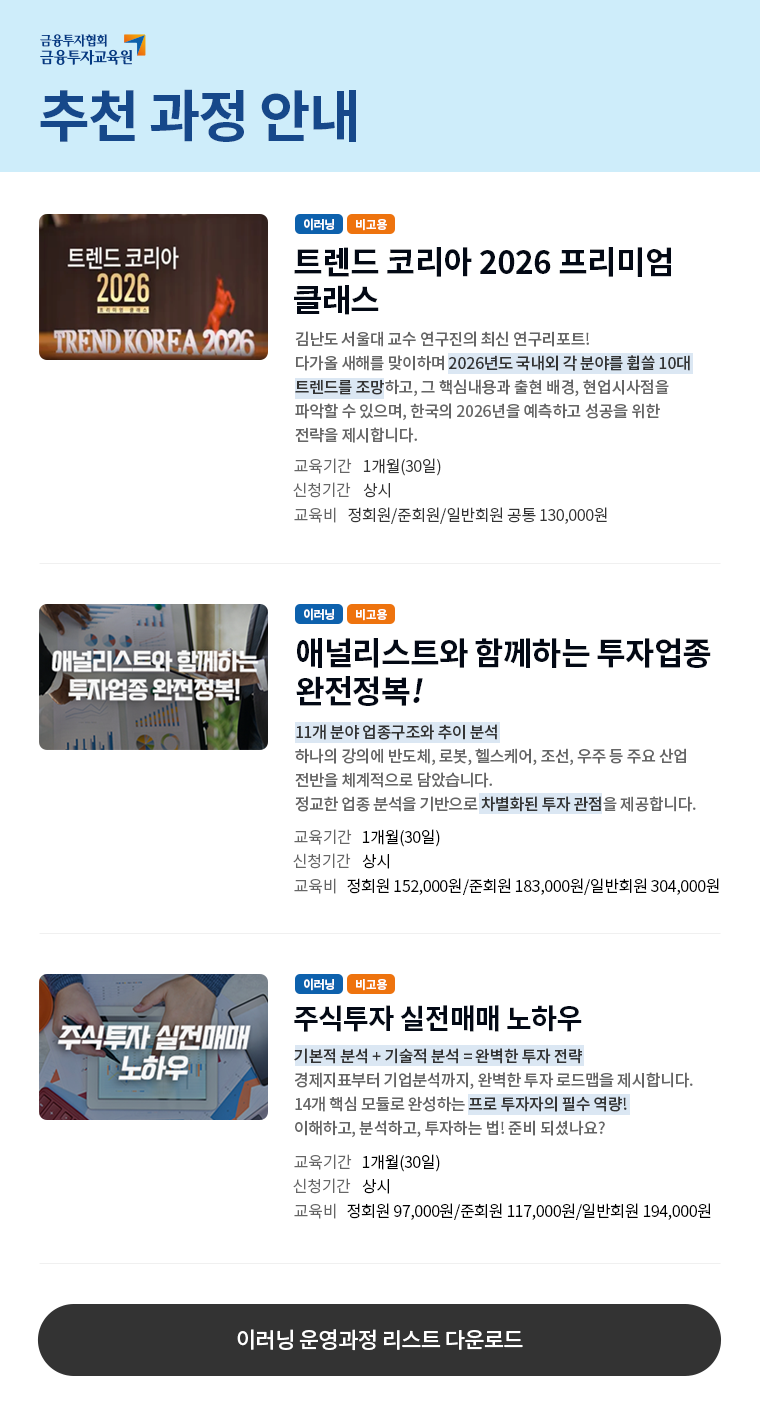
<style>
.page{position:relative;width:760px;height:1416px;background:#ffffff}
.page>*{position:absolute;margin:0}
.t1{font:56px "NotoSansCJKkr-Bold";letter-spacing:-0.03em;color:#16488a}
.t2{font:12px "NotoSansCJKkr-Bold";letter-spacing:-0.02em;color:#ffffff}
.t3{font:32px/38px "NotoSansCJKkr-Bold";letter-spacing:-0.02em;color:#030915}
.t4{font:16px/24px "NotoSansCJKkr-Medium";letter-spacing:-0.02em;color:#666666}
.t5{font:16px/24px "NotoSansCJKkr-Medium";letter-spacing:-0.02em;color:#333333}
.t6{font:16px "NotoSansCJKkr-DemiLight";letter-spacing:-0.02em;color:#666666}
.t7{font:16px "NotoSansCJKkr-DemiLight";letter-spacing:-0.02em;color:#333333}
.t8{font:32px/38px "NotoSansCJKkr-Bold";letter-spacing:-0.02em;color:#030915;font-style:italic}
.t9{font:16px "NotoSansCJKkr-DemiLight";letter-spacing:-0.02em;color:#000000}
.t10{font:28px "NotoSansCJKkr-Bold";letter-spacing:-0.02em;color:#030915}
.t11{font:22px "NotoSansCJKkr-Medium";letter-spacing:-0.03em;color:#ffffff}
</style>
<div class="page">
<p class="t1" style="left:40px;top:89px;width:316px;height:53px">추천 과정 안내</p>
<p class="t2" style="left:304px;top:218px;width:30px;height:13px">이러닝</p>
<p class="t2" style="left:356px;top:219px;width:31px;height:12px">비고용</p>
<p class="t3" style="left:294px;top:247px;width:377px;height:68px">트렌드 코리아 2026 프리미엄<br>클래스</p>
<p class="t4" style="left:295px;top:331px;width:395px;height:112px">김난도 서울대 교수 연구진의 최신 연구리포트!<br>다가올 새해를 맞이하며 <span class="t5">2026년도 국내외 각 분야를 휩쓸 10대<br>트렌드를 조망</span>하고, 그 핵심내용과 출현 배경, 현업시사점을<br>파악할 수 있으며, 한국의 2026년을 예측하고 성공을 위한<br>전략을 제시합니다.</p>
<p class="t6" style="left:294px;top:458px;width:58px;height:16px">교육기간</p>
<p class="t7" style="left:363px;top:458px;width:78px;height:18px">1개월(30일)</p>
<p class="t6" style="left:293px;top:482px;width:58px;height:16px">신청기간</p>
<p class="t7" style="left:363px;top:483px;width:27px;height:15px">상시</p>
<p class="t6" style="left:294px;top:507px;width:42px;height:16px">교육비</p>
<p class="t7" style="left:348px;top:507px;width:259px;height:17px">정회원/준회원/일반회원 공통 130,000원</p>
<p class="t2" style="left:304px;top:608px;width:30px;height:13px">이러닝</p>
<p class="t2" style="left:356px;top:609px;width:31px;height:12px">비고용</p>
<p class="t3" style="left:296px;top:638px;width:415px;height:68px">애널리스트와 함께하는 투자업종<br>완전정복<span class="t8">!</span></p>
<p class="t4" style="left:295px;top:724px;width:401px;height:88px"><span class="t5">11개 분야 업종구조와 추이 분석<br></span>하나의 강의에 반도체, 로봇, 헬스케어, 조선, 우주 등 주요 산업<br>전반을 체계적으로 담았습니다. <br>정교한 업종 분석을 기반으로 <span class="t5">차별화된 투자 관점</span>을 제공합니다.</p>
<p class="t6" style="left:294px;top:829px;width:58px;height:16px">교육기간</p>
<p class="t9" style="left:362px;top:829px;width:78px;height:18px">1개월(30일)</p>
<p class="t6" style="left:293px;top:853px;width:58px;height:16px">신청기간</p>
<p class="t9" style="left:362px;top:854px;width:27px;height:15px">상시</p>
<p class="t6" style="left:294px;top:878px;width:42px;height:16px">교육비</p>
<p class="t9" style="left:347px;top:878px;width:372px;height:17px">정회원 152,000원/준회원 183,000원/일반회원 304,000원</p>
<p class="t2" style="left:304px;top:978px;width:30px;height:13px">이러닝</p>
<p class="t2" style="left:356px;top:979px;width:31px;height:12px">비고용</p>
<p class="t10" style="left:294px;top:1005px;width:288px;height:27px">주식투자 실전매매 노하우</p>
<p class="t4" style="left:294px;top:1048px;width:399px;height:90px"><span class="t5">기본적 분석 + 기술적 분석 = 완벽한 투자 전략<br></span>경제지표부터 기업분석까지, 완벽한 투자 로드맵을 제시합니다.<br>14개 핵심 모듈로 완성하는 <span class="t5">프로 투자자의 필수 역량!<br></span>이해하고, 분석하고, 투자하는 법! 준비 되셨나요?</p>
<p class="t6" style="left:294px;top:1154px;width:58px;height:16px">교육기간</p>
<p class="t9" style="left:362px;top:1154px;width:78px;height:18px">1개월(30일)</p>
<p class="t6" style="left:293px;top:1178px;width:58px;height:16px">신청기간</p>
<p class="t9" style="left:362px;top:1179px;width:27px;height:15px">상시</p>
<p class="t6" style="left:294px;top:1203px;width:42px;height:16px">교육비</p>
<p class="t9" style="left:347px;top:1203px;width:364px;height:17px">정회원 97,000원/준회원 117,000원/일반회원 194,000원</p>
<p class="t11" style="left:237px;top:1329px;width:286px;height:22px">이러닝 운영과정 리스트 다운로드</p>
</div>
